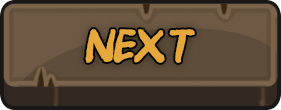
<style>
.page{position:relative;width:281px;height:110px}
.page>*{position:absolute;margin:0}
.t1{font:48.6px "SangSangFlowerRoad";letter-spacing:-0.025em;color:#e5a83d;text-transform:uppercase;font-weight:bold;font-style:italic}
</style>
<div class="page">
<p class="t1" style="left:85px;top:29px;width:110px;height:34px">NEXT</p>
</div>
